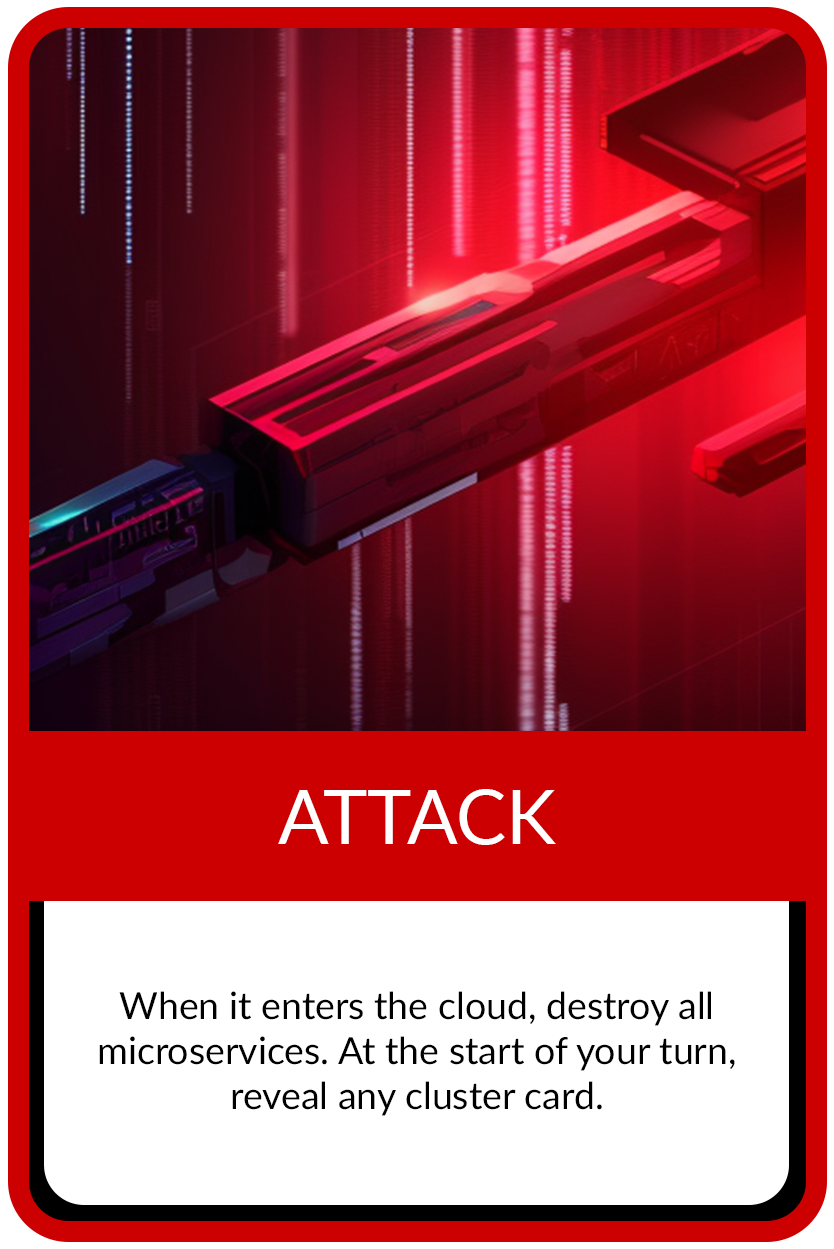
<style>
.page{position:relative;width:834px;height:1249px;background:#ffffff}
.page>*{position:absolute;margin:0}
.t1{font:75px "Lato-Regular";color:#ffffff}
.t2{font:37.5px "Lato-Regular";color:#000000}
</style>
<div class="page">
<p class="t1" style="left:278px;top:789px;width:278px;height:56px">ATTACK</p>
<p class="t2" style="left:99px;top:991px;width:636px;height:125px;text-align:center">When it enters the cloud, destroy all microservices. At the start of your turn, reveal any cluster card.</p>
</div>
